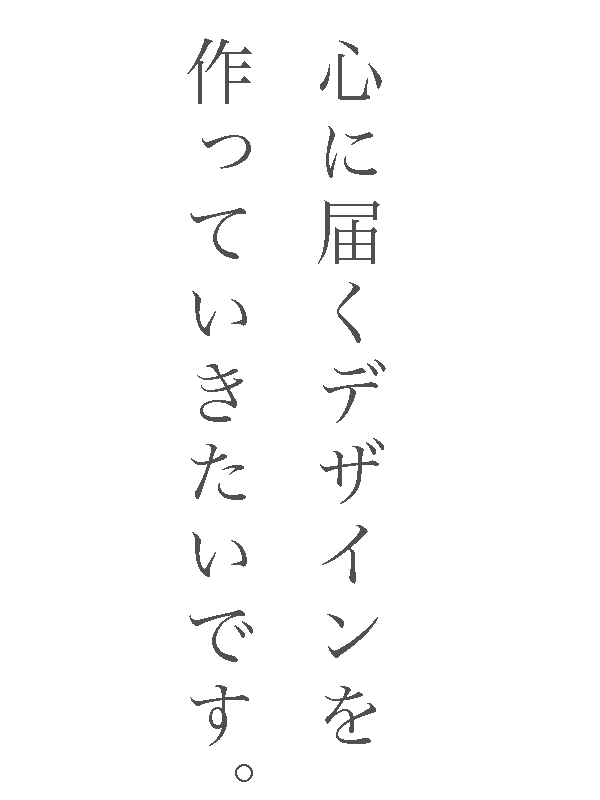
<style>
.page{position:relative;width:600px;height:800px;background:#ffffff}
.page>*{position:absolute;margin:0}
.t1{font:71.1px/130.4px "HiraMinProN-W3";letter-spacing:0.13em;color:#534f4d}
</style>
<div class="page">
<p class="t1" style="left:187px;top:38px;width:199px;height:744px">心に届くデザインを<br>作っていきたいです。</p>
</div>
